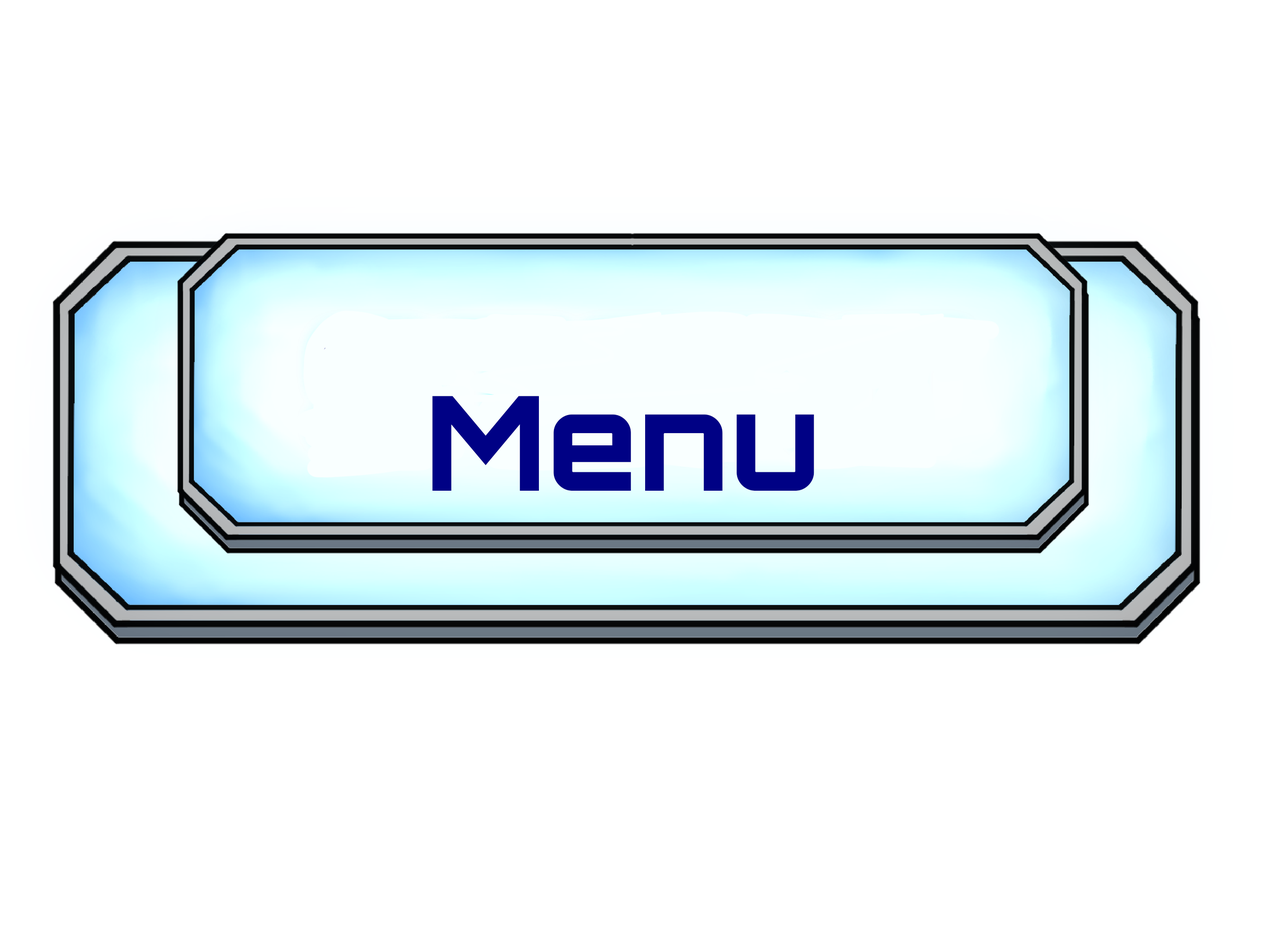
<style>
.page{position:relative;width:1261px;height:946px;background:#ffffff}
.page>*{position:absolute;margin:0}
.t1{font:131.4px "Orbitron-ExtraBold";color:#000185}
</style>
<div class="page">
<p class="t1" style="left:432px;top:396px;width:382px;height:95px">Menu</p>
</div>
